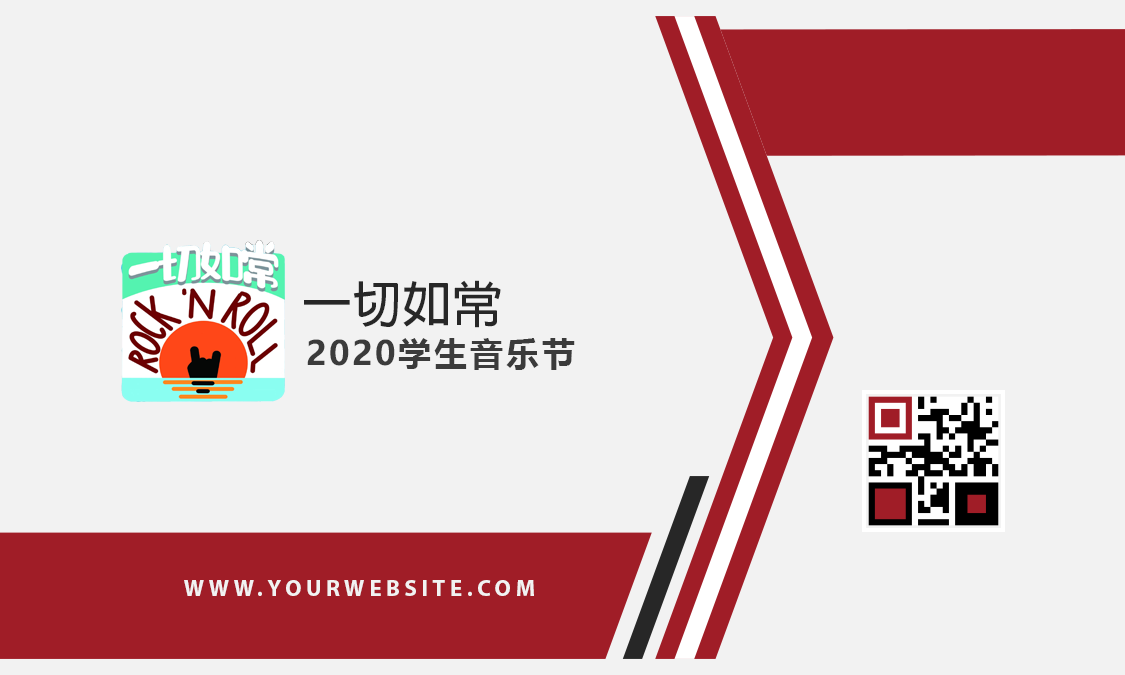
<style>
.page{position:relative;width:1125px;height:675px;background:#f2f2f2}
.page>*{position:absolute;margin:0}
.t1{font:50px "AdobeFanHeitiStd-Bold";color:#272727}
.t2{font:33.3px "MicrosoftYaHeiUI-Bold";letter-spacing:0.08em;color:#3b3b3b}
.t3{font:22.7px "MyriadPro-Bold";letter-spacing:0.2em;color:#f2f2f2}
</style>
<div class="page">
<p class="t1" style="left:304px;top:280px;width:197px;height:48px">一切如常</p>
<p class="t2" style="left:307px;top:338px;width:268px;height:32px">2020学生音乐节</p>
<p class="t3" style="left:184px;top:580px;width:350px;height:16px">WWW.YOURWEBSITE.COM</p>
</div>
